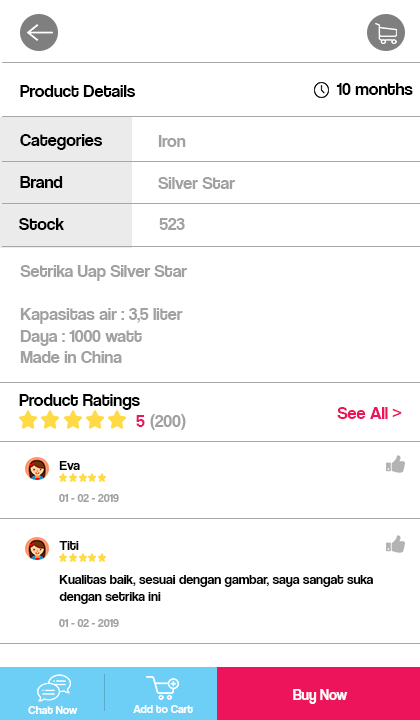
<style>
.page{position:relative;width:420px;height:720px;background:#ffffff}
.page>*{position:absolute;margin:0}
.t1{font:18px "CoolveticaRg-Regular";color:#000000}
.t2{font:18px "CoolveticaRg-Regular";color:#a1a1a1}
.t3{font:18px "CoolveticaRg-Regular";color:#ed145b}
.t4{font:14px "CoolveticaRg-Regular";color:#000000}
.t5{font:12px "CoolveticaRg-Regular";color:#a1a1a1}
.t6{font:15px "CoolveticaRg-Regular";color:#ffffff}
.t7{font:12px "CoolveticaRg-Regular";color:#ffffff}
</style>
<div class="page">
<p class="t1" style="left:20px;top:85px;width:115px;height:12px">Product Details</p>
<p class="t1" style="left:336px;top:83px;width:77px;height:12px">10 months</p>
<p class="t1" style="left:20px;top:134px;width:82px;height:16px">Categories</p>
<p class="t2" style="left:158px;top:135px;width:28px;height:12px">Iron</p>
<p class="t1" style="left:20px;top:176px;width:43px;height:12px">Brand</p>
<p class="t2" style="left:158px;top:177px;width:77px;height:12px">Silver Star</p>
<p class="t1" style="left:19px;top:218px;width:46px;height:12px">Stock</p>
<p class="t2" style="left:159px;top:218px;width:26px;height:12px">523</p>
<p class="t2" style="left:20px;top:265px;width:167px;height:98px">Setrika Uap Silver Star<br><br>Kapasitas air : 3,5 liter<br>Daya : 1000 watt<br>Made in China</p>
<p class="t1" style="left:19px;top:394px;width:121px;height:16px">Product Ratings</p>
<p class="t2" style="left:136px;top:414px;width:50px;height:16px"><span class="t3">5 </span>(200)</p>
<p class="t3" style="left:337px;top:407px;width:65px;height:12px">See All &gt;</p>
<p class="t4" style="left:59px;top:461px;width:21px;height:9px">Eva</p>
<p class="t5" style="left:59px;top:494px;width:60px;height:8px">01 - 02 - 2019</p>
<p class="t4" style="left:59px;top:541px;width:20px;height:9px">Titi</p>
<p class="t4" style="left:59px;top:575px;width:314px;height:29px">Kualitas baik, sesuai dengan gambar, saya sangat suka<br>dengan setrika ini</p>
<p class="t5" style="left:59px;top:619px;width:60px;height:8px">01 - 02 - 2019</p>
<p class="t6" style="left:293px;top:689px;width:55px;height:15px">Buy Now</p>
<p class="t7" style="left:28px;top:706px;width:50px;height:8px">Chat Now</p>
<p class="t7" style="left:133px;top:705px;width:60px;height:8px">Add to Cart</p>
</div>
